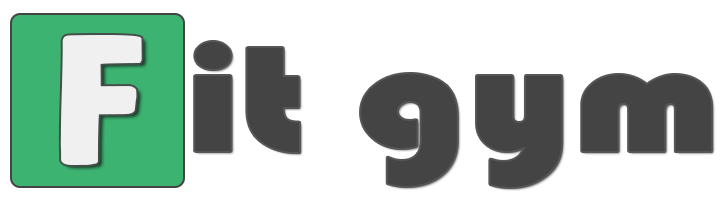
<style>
.page{position:relative;width:720px;height:200px;background:#ffffff}
.page>*{position:absolute;margin:0}
.t1{font:185.2px "SteamedDEMO-Regular";letter-spacing:0.005em;color:#f0f0f0;scale:1.25 1}
.t2{font:154.3px "Bauhaus93";letter-spacing:0.005em;color:#444444;scale:1.25 1}
</style>
<div class="page">
<p class="t1" style="left:60px;top:35px;width:82px;height:130px">f</p>
<p class="t2" style="left:195px;top:42px;width:517px;height:145px">it gym</p>
</div>
